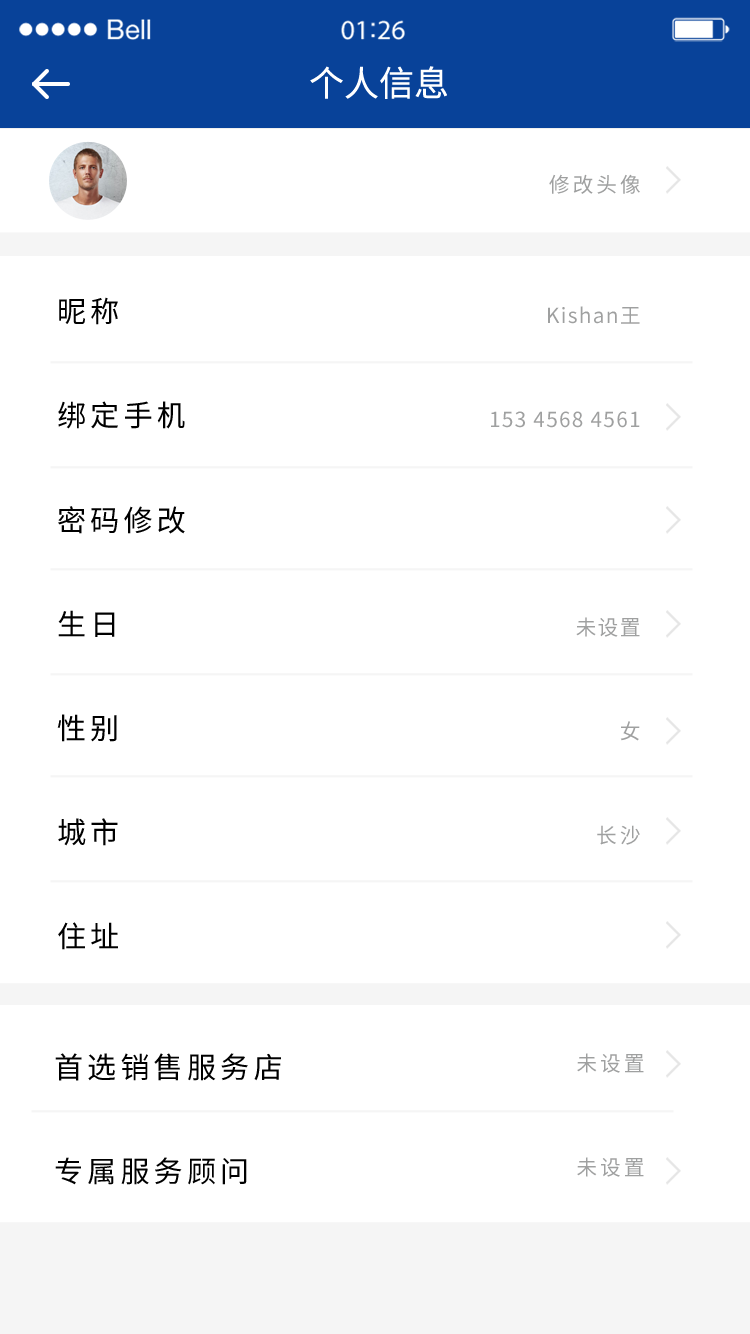
<style>
.page{position:relative;width:750px;height:1334px;background:#ffffff}
.page>*{position:absolute;margin:0}
.t1{font:35px "SourceHanSansCN-Regular";color:#ffffff}
.t2{font:20.8px "SourceHanSansCN-Regular";letter-spacing:0.14em;color:#9fa0a0}
.t3{font:29.2px/104.2px "SourceHanSansCN-Regular";letter-spacing:0.14em;color:#000000}
.t4{font:20.8px/104.2px "SourceHanSansCN-Regular";letter-spacing:0.06em;color:#9fa0a0}
.t5{font:20.8px/104.2px "SourceHanSansCN-Regular";letter-spacing:0.14em;color:#9fa0a0}
</style>
<div class="page">
<p class="t1" style="left:310px;top:66px;width:137px;height:33px">个人信息</p>
<p class="t2" style="left:549px;top:174px;width:91px;height:20px">修改头像</p>
<p class="t3" style="left:57px;top:297px;width:128px;height:653px">昵称<br>绑定手机<br>密码修改<br>生日<br>性别<br>城市<br>住址</p>
<p class="t4" style="left:491px;top:306px;width:149px;height:539px;text-align:right">Kishan王<br>153 4568 4561<br><br>未设置<br><span class="t5">女<br>长沙</span></p>
<p class="t3" style="left:55px;top:1053px;width:226px;height:132px">首选销售服务店<br>专属服务顾问</p>
<p class="t5" style="left:577px;top:1053px;width:67px;height:124px;text-align:right">未设置<br>未设置</p>
</div>
